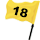
<style>
.page{position:relative;width:40px;height:40px;background:#ffffff}
.page>*{position:absolute;margin:0}
.t1{font:12px "Arial-Black";color:#000101}
</style>
<div class="page">
<p class="t1" style="left:13px;top:6px;width:15px;height:12px;rotate:14deg">18</p>
</div>
